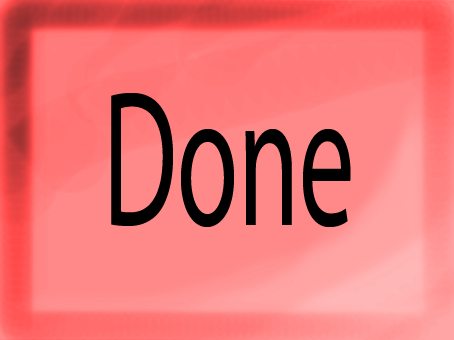
<style>
.page{position:relative;width:454px;height:340px;background:#ff8888}
.page>*{position:absolute;margin:0}
.t1{font:194.6px "MyriadPro-Regular";color:#000000;scale:0.57 1}
</style>
<div class="page">
<p class="t1" style="left:111px;top:93px;width:240px;height:134px">Done</p>
</div>
